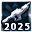
<style>
.page{position:relative;width:32px;height:32px}
.page>*{position:absolute;margin:0}
.t1{font:9.2px "AdobeHeitiStd-Regular";letter-spacing:0.18em;color:#ffffff}
</style>
<div class="page">
<p class="t1" style="left:4px;top:23px;width:26px;height:7px">2025</p>
</div>
